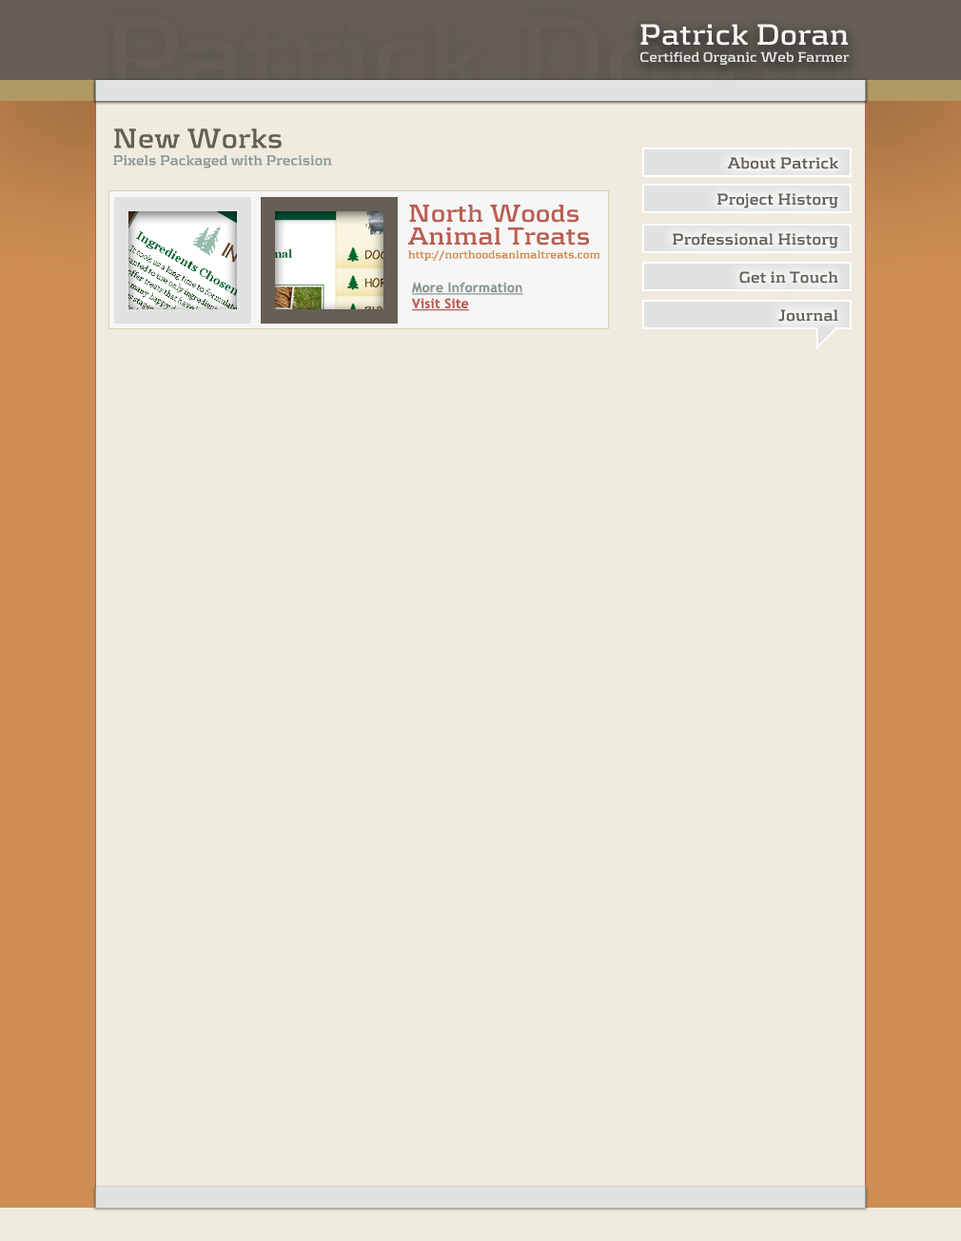
<style>
.page{position:relative;width:961px;height:1241px;background:#efebdf}
.page>*{position:absolute;margin:0}
.t1{font:14.3px "Kontrapunkt-Bold";letter-spacing:0.005em;color:#e0e3e2}
.t2{font:30.3px "Kontrapunkt-Bold";letter-spacing:0.015em;color:#f7f6f7}
.t3{font:14.3px "Kontrapunkt-Bold";letter-spacing:0.005em;color:#899796}
.t4{font:28.5px "Kontrapunkt-Bold";letter-spacing:0.015em;color:#655f56}
.t5{font:16.2px "Kontrapunkt-Bold";letter-spacing:0.015em;color:#655f56}
.t6{font:11.4px "Kontrapunkt-Bold";letter-spacing:0.01em;color:#ce8e53}
.t7{font:25.7px/22.8px "Kontrapunkt-Bold";letter-spacing:0.015em;color:#b95e52}
.t8{font:13.3px "TrebuchetMS-Bold";letter-spacing:0.015em;color:#899796;text-decoration:underline}
.t9{font:13.3px "TrebuchetMS-Bold";letter-spacing:0.015em;color:#b95e52;text-decoration:underline}
</style>
<div class="page">
<p class="t1" style="left:640px;top:24px;width:210px;height:41px;text-align:right"><span class="t2">Patrick Doran<br></span>Certified Organic Web Farmer</p>
<p class="t3" style="left:113px;top:128px;width:219px;height:40px"><span class="t4">New Works<br></span>Pixels Packaged with Precision</p>
<p class="t5" style="left:727px;top:157px;width:111px;height:12px">About Patrick</p>
<p class="t5" style="left:717px;top:193px;width:121px;height:15px">Project History</p>
<p class="t6" style="left:408px;top:205px;width:192px;height:56px"><span class="t7">North Woods<br>Animal Treats<br></span>http://northoodsanimaltreats.com</p>
<p class="t5" style="left:673px;top:233px;width:165px;height:15px">Professional History</p>
<p class="t8" style="left:412px;top:282px;width:111px;height:29px">More Information<br><span class="t9">Visit Site</span></p>
<p class="t5" style="left:739px;top:271px;width:99px;height:13px">Get in Touch</p>
<p class="t5" style="left:778px;top:309px;width:60px;height:13px">Journal</p>
</div>
